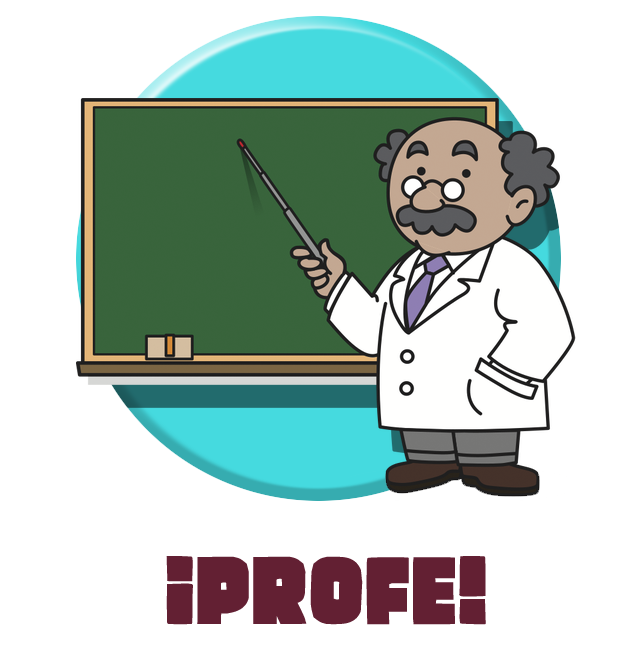
<style>
.page{position:relative;width:638px;height:671px;background:#ffffff}
.page>*{position:absolute;margin:0}
.t1{font:104.2px "FrostGiant";letter-spacing:0.02em;color:#632033}
</style>
<div class="page">
<p class="t1" style="left:166px;top:556px;width:320px;height:69px">¡PROFE!</p>
</div>
